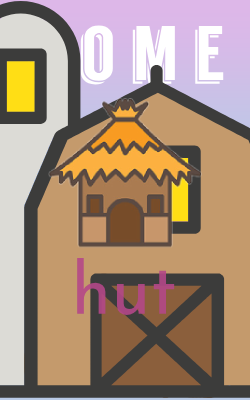
<style>
.page{position:relative;width:250px;height:400px;background:#c49a6c}
.page>*{position:absolute;margin:0}
.t1{font:77px "Langdon";color:#ffffff}
.t2{font:72px "JosefinSans-Regular";color:#b44788}
</style>
<div class="page">
<p class="t1" style="left:27px;top:25px;width:197px;height:60px">h o m e</p>
<p class="t2" style="left:77px;top:257px;width:98px;height:58px;opacity:0.89">hut</p>
</div>
